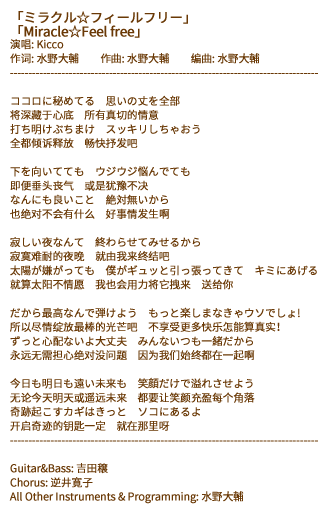
<style>
.page{position:relative;width:328px;height:514px;background:#ffffff}
.page>*{position:absolute;margin:0}
.t1{font:10.7px/14.1px "SourceHanSansSC-Regular";letter-spacing:-0.03em;color:#6a3906;font-weight:bold}
.t2{font:13.3px/14.1px "SourceHanSansSC-Regular";letter-spacing:-0.03em;color:#6a3906;font-weight:bold}
</style>
<div class="page">
<p class="t1" style="left:9px;top:11px;width:309px;height:493px"><span class="t2">「ミラクル☆フィールフリー」<br>「Miracle☆Feel free」<br></span>演唱: Kicco<br>作词: 水野大輔　　作曲: 水野大輔　　编曲: 水野大輔<br>------------------------------------------------------------------------------------<br><br>ココロに秘めてる　思いの丈を全部<br>将深藏于心底　所有真切的情意<br>打ち明けぶちまけ　スッキリしちゃおう<br>全都倾诉释放　畅快抒发吧<br><br>下を向いてても　ウジウジ悩んでても<br>即便垂头丧气　或是犹豫不决<br>なんにも良いこと　絶対無いから<br>也绝对不会有什么　好事情发生啊<br><br>寂しい夜なんて　終わらせてみせるから<br>寂寞难耐的夜晚　就由我来终结吧<br>太陽が嫌がっても　僕がギュッと引っ張ってきて　キミにあげる<br>就算太阳不情愿　我也会用力将它拽来　送给你<br><br>だから最高なんで弾けよう　もっと楽しまなきゃウソでしょ!<br>所以尽情绽放最棒的光芒吧　不享受更多快乐怎能算真实！<br>ずっと心配ないよ大丈夫　みんないつも一緒だから<br>永远无需担心绝对没问题　因为我们始终都在一起啊<br><br>今日も明日も遠い未来も　笑顔だけで溢れさせよう<br>无论今天明天或遥远未来　都要让笑颜充盈每个角落<br>奇跡起こすカギはきっと　ソコにあるよ<br>开启奇迹的钥匙一定　就在那里呀<br>------------------------------------------------------------------------------------<br><br>Guitar&amp;Bass: 吉田穣<br>Chorus: 逆井寛子<br>All Other Instruments &amp; Programming: 水野大輔</p>
</div>
